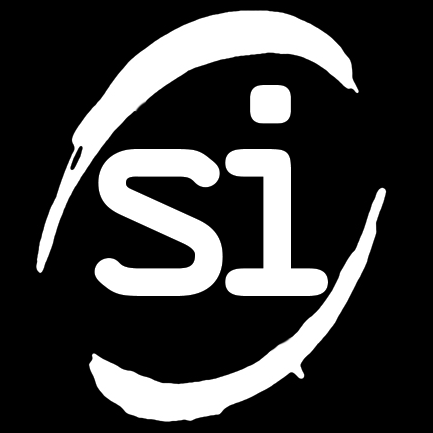
<style>
.page{position:relative;width:433px;height:433px;background:#000000}
.page>*{position:absolute;margin:0}
.t1{font:268.2px "OCRAStd";color:#ffffff;font-weight:bold}
</style>
<div class="page">
<p class="t1" style="left:225px;top:85px;width:103px;height:211px">i</p>
<p class="t1" style="left:94px;top:149px;width:129px;height:147px">s</p>
</div>
